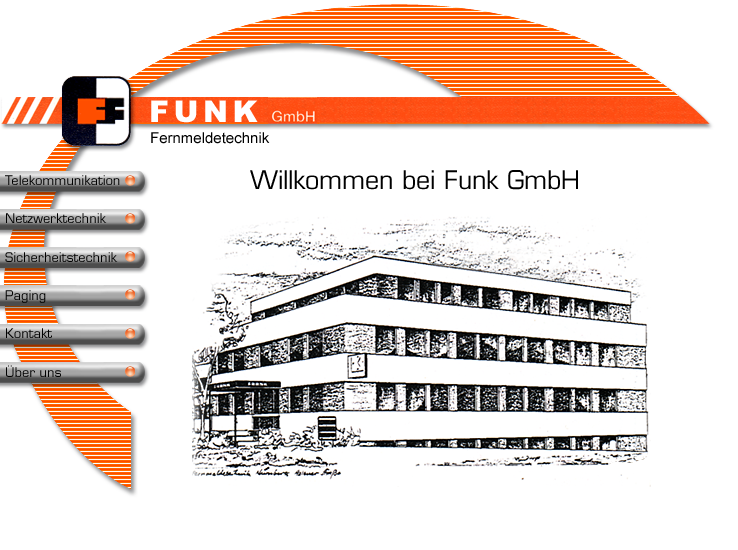
<style>
.page{position:relative;width:738px;height:550px;background:#ffffff}
.page>*{position:absolute;margin:0}
.t1{font:30px "Arial-Black";letter-spacing:0.15em;color:#ffffff}
.t2{font:15px "ArialMT";color:#000000}
.t3{font:25px "Eurostile";color:#000000}
.t4{font:13px "Eurostile";color:#000000}
</style>
<div class="page">
<p class="t1" style="left:151px;top:100px;width:107px;height:23px">FUNK</p>
<p class="t2" style="left:151px;top:132px;width:119px;height:12px">Fernmeldetechnik</p>
<p class="t3" style="left:250px;top:170px;width:328px;height:20px">Willkommen bei Funk GmbH</p>
<p class="t4" style="left:5px;top:175px;width:115px;height:10px">Telekommunikation</p>
<p class="t4" style="left:6px;top:213px;width:101px;height:10px">Netzwerktechnik</p>
<p class="t4" style="left:5px;top:252px;width:113px;height:10px">Sicherheitstechnik</p>
<p class="t4" style="left:5px;top:290px;width:41px;height:13px">Paging</p>
<p class="t4" style="left:6px;top:328px;width:46px;height:10px">Kontakt</p>
<p class="t4" style="left:6px;top:365px;width:55px;height:12px">Über uns</p>
</div>
